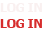
<style>
.page{position:relative;width:43px;height:30px;background:#ffffff}
.page>*{position:absolute;margin:0}
.t1{font:12px "Tahoma-Bold";color:#f9f0f0}
.t2{font:12px "Tahoma-Bold";color:#d62c2c}
</style>
<div class="page">
<p class="t1" style="left:0px;top:3px;width:42px;height:9px">LOG IN</p>
<p class="t2" style="left:0px;top:19px;width:42px;height:9px">LOG IN</p>
</div>
